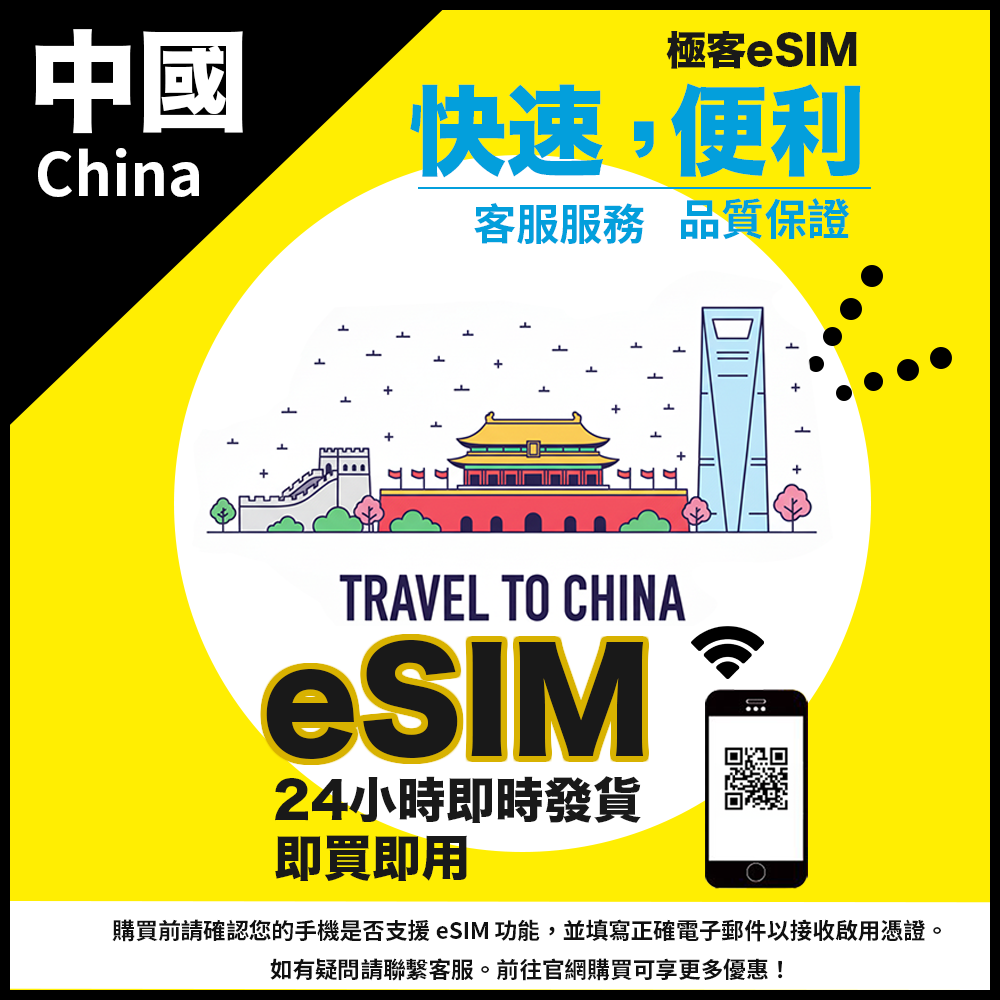
<style>
.page{position:relative;width:1000px;height:1000px;background:#ffee02}
.page>*{position:absolute;margin:0}
.t1{font:109.8px "HiraKakuStdN-W8";color:#ffffff}
.t2{font:40.1px "HiraKakuStdN-W8";color:#191919}
.t3{font:98.2px "HiraKakuStdN-W8";color:#039fdc}
.t4{font:59.4px "SourceHanSansTC-Bold";color:#ffffff}
.t5{font:43.1px "SourceHanSansTC-Bold";color:#039fdc}
.t6{font:137.6px "HiraKakuStdN-W8";color:#191919}
.t7{font:48.9px "HiraKakuStdN-W8";color:#191919}
.t8{font:22.7px "SourceHanSansTC-Bold";color:#101010}
</style>
<div class="page">
<p class="t1" style="left:35px;top:29px;width:208px;height:105px">中國</p>
<p class="t2" style="left:666px;top:31px;width:191px;height:38px">極客eSIM</p>
<p class="t3" style="left:410px;top:83px;width:451px;height:95px">快速  便利</p>
<p class="t3" style="left:634px;top:121px;width:20px;height:37px">,</p>
<p class="t4" style="left:38px;top:148px;width:161px;height:49px">China</p>
<p class="t5" style="left:681px;top:198px;width:169px;height:42px">品質保證</p>
<p class="t5" style="left:474px;top:202px;width:171px;height:42px">客服服務</p>
<p class="t6" style="left:266px;top:639px;width:378px;height:120px">eSIM</p>
<p class="t7" style="left:275px;top:776px;width:366px;height:47px">24小時即時發貨</p>
<p class="t7" style="left:275px;top:835px;width:192px;height:46px">即買即用</p>
<p class="t8" style="left:112px;top:919px;width:829px;height:62px;text-align:center">購買前請確認您的手機是否支援 eSIM 功能，並填寫正確電子郵件以接收啟用憑證。<br>如有疑問請聯繫客服。前往官網購買可享更多優惠！</p>
</div>
